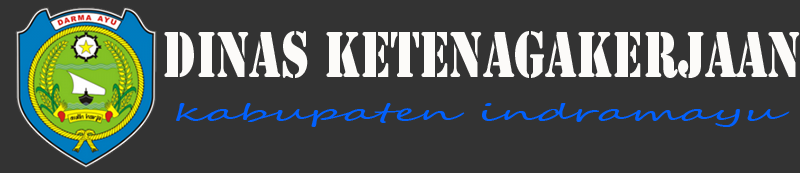
<style>
.page{position:relative;width:800px;height:173px;background:#333333}
.page>*{position:absolute;margin:0}
.t1{font:60.3px "StencilStd";color:#fcfbf9;scale:0.74 1}
.t2{font:24px "SegoeScript";color:#0260fc;scale:2.06 1}
</style>
<div class="page">
<p class="t1" style="left:164px;top:31px;width:636px;height:47px">DINAS KETENAGAKERJAAN</p>
<p class="t2" style="left:176px;top:103px;width:614px;height:24px">kabupaten indramayu</p>
</div>
